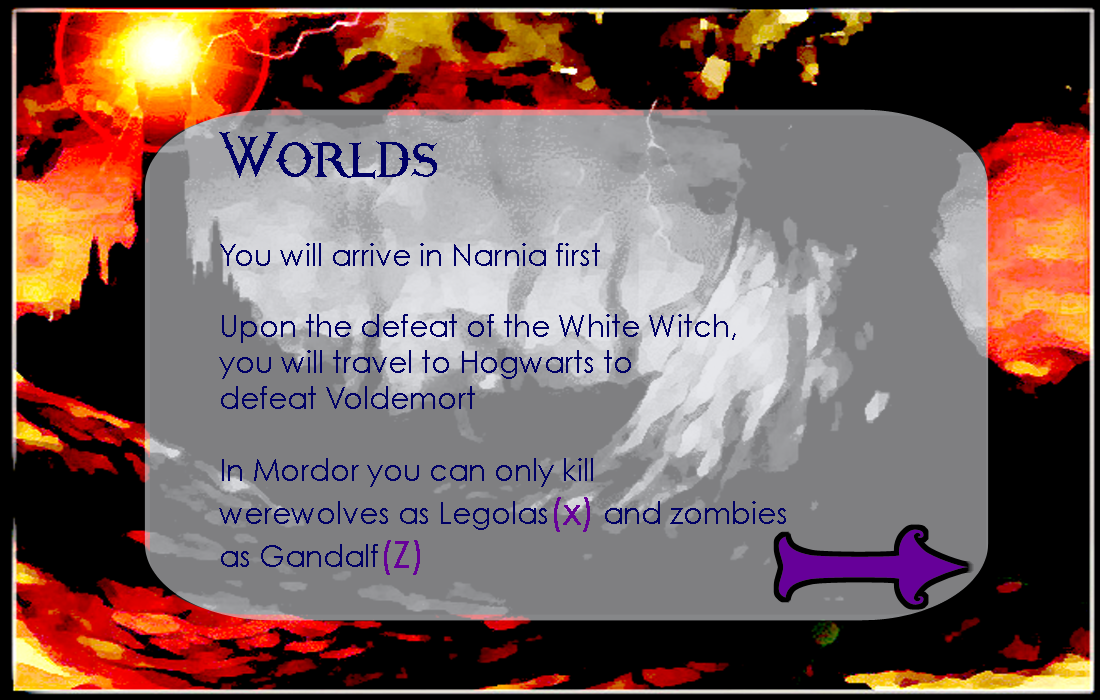
<style>
.page{position:relative;width:1100px;height:700px;background:#7f7f81}
.page>*{position:absolute;margin:0}
.t1{font:29.9px "CenturyGothic";color:#000066}
.t2{font:47.8px "Narnia-BLL";color:#000066}
.t3{font:35.9px "CenturyGothic";color:#660099;font-weight:bold}
</style>
<div class="page">
<p class="t1" style="left:219px;top:132px;width:567px;height:443px"><span class="t2">Worlds<br><br></span>You will arrive in Narnia first<br><br>Upon the defeat of the White Witch,<br>you will travel to Hogwarts to <br>defeat Voldemort<br><br>In Mordor you can only kill <br>werewolves as Legolas<span class="t3">(x)</span> and zombies<br>as Gandalf<span class="t3">(Z)</span></p>
</div>
